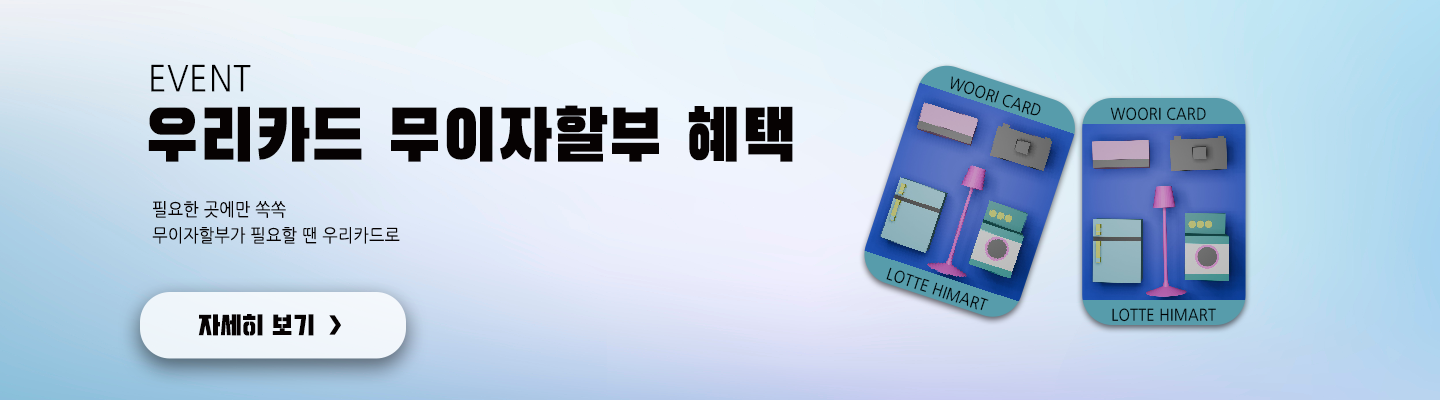
<style>
.page{position:relative;width:1440px;height:400px}
.page>*{position:absolute;margin:0}
.t1{font:36px "NanumGothic";letter-spacing:0.02em;color:#000000;text-transform:uppercase;scale:0.9 1}
.t2{font:16px "NanumGothic";letter-spacing:0.02em;color:#000000;text-transform:uppercase;scale:0.9 1}
.t3{font:72px "BlackHanSans-Regular";letter-spacing:0.02em;color:#060202;text-transform:uppercase;scale:0.9 1}
.t4{font:18px "NanumGothic";letter-spacing:0.02em;color:#060202;text-transform:uppercase;scale:0.9 1}
.t5{font:24px "Typo_SsangmunDong_St";letter-spacing:0.02em;color:#060202;text-transform:uppercase;scale:0.9 1}
</style>
<div class="page">
<p class="t1" style="left:151px;top:64px;width:100px;height:28px">EVENT</p>
<p class="t2" style="left:950px;top:76px;width:91px;height:40px;rotate:18deg">WOORI CARD</p>
<p class="t3" style="left:148px;top:105px;width:645px;height:57px">우리카드 무이자할부 혜택</p>
<p class="t2" style="left:1110px;top:107px;width:96px;height:14px">WOORI CARD</p>
<p class="t4" style="left:153px;top:201px;width:133px;height:17px">필요한 곳에만 쏙쏙</p>
<p class="t4" style="left:152px;top:227px;width:248px;height:17px">무이자할부가 필요할 땐 우리카드로</p>
<p class="t2" style="left:886px;top:267px;width:103px;height:44px;rotate:18deg">LOTTE HIMART</p>
<p class="t5" style="left:198px;top:314px;width:143px;height:22px">자세히 보기  &gt;</p>
<p class="t2" style="left:1112px;top:308px;width:104px;height:14px">LOTTE HIMART</p>
</div>
